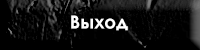
<style>
.page{position:relative;width:200px;height:50px;background:#000000}
.page>*{position:absolute;margin:0}
.t1{font:18.2px "CenturyGothic-Bold";color:#ffffff}
</style>
<div class="page">
<p class="t1" style="left:71px;top:15px;width:57px;height:16px">Выход</p>
</div>
